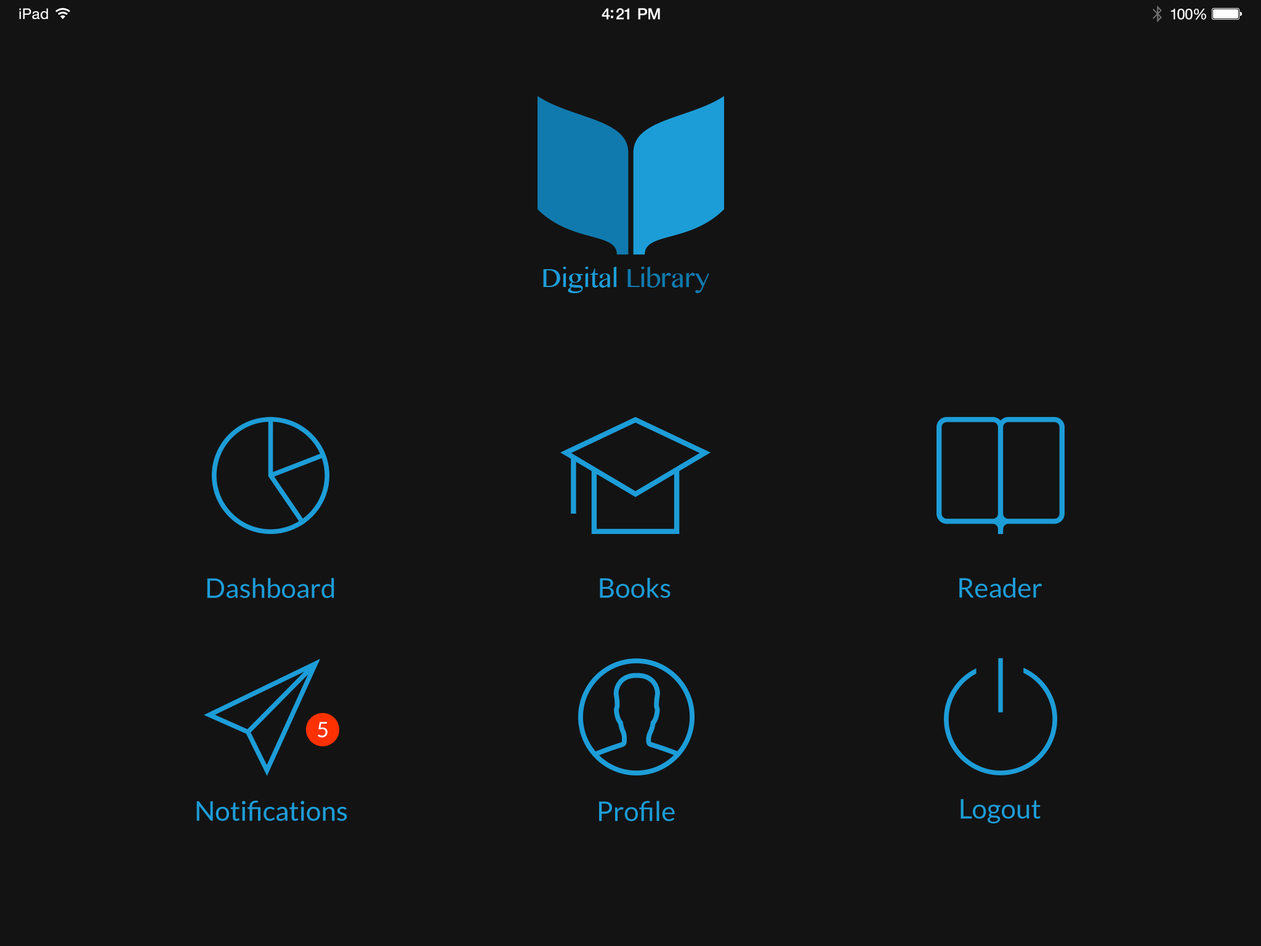
<style>
.page{position:relative;width:1261px;height:946px;background:#131313}
.page>*{position:absolute;margin:0}
.t1{font:14.6px "HelveticaNeue";letter-spacing:0.02em;color:#ffffff}
.t2{font:15.4px "HelveticaNeue-Medium";letter-spacing:-0.02em;color:#ffffff}
.t3{font:14.8px "HelveticaNeue";letter-spacing:-0.02em;color:#ffffff}
.t4{font:27.1px "Lato-Regular";color:#1d9dd8}
.t5{font:21.3px "Lato-Regular";color:#ffffff}
</style>
<div class="page">
<p class="t1" style="left:19px;top:8px;width:29px;height:11px">iPad</p>
<p class="t2" style="left:602px;top:8px;width:58px;height:12px">4:21 PM</p>
<p class="t3" style="left:1170px;top:9px;width:36px;height:11px">100%</p>
<p class="t4" style="left:207px;top:578px;width:127px;height:20px">Dashboard</p>
<p class="t4" style="left:600px;top:578px;width:70px;height:20px">Books</p>
<p class="t4" style="left:959px;top:578px;width:83px;height:20px">Reader</p>
<p class="t5" style="left:318px;top:722px;width:10px;height:16px">5</p>
<p class="t4" style="left:196px;top:800px;width:151px;height:21px">Notifications</p>
<p class="t4" style="left:599px;top:800px;width:76px;height:21px">Profile</p>
<p class="t4" style="left:960px;top:799px;width:81px;height:24px">Logout</p>
</div>
